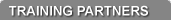
<style>
.page{position:relative;width:171px;height:20px;background:#858585}
.page>*{position:absolute;margin:0}
.t1{font:13.3px "Arial-BoldMT";color:#ffffff}
</style>
<div class="page">
<p class="t1" style="left:9px;top:5px;width:139px;height:11px">TRAINING PARTNERS</p>
</div>
